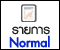
<style>
.page{position:relative;width:60px;height:50px;background:#ffffff}
.page>*{position:absolute;margin:0}
.t1{font:18px "PSLxKittithada-Bold";color:#202020}
.t2{font:18px "PSLxKittithada-Bold";color:#0d28c9;font-weight:bold}
</style>
<div class="page">
<p class="t1" style="left:12px;top:26px;width:38px;height:9px">รายการ</p>
<p class="t2" style="left:9px;top:35px;width:41px;height:13px">Normal</p>
</div>
